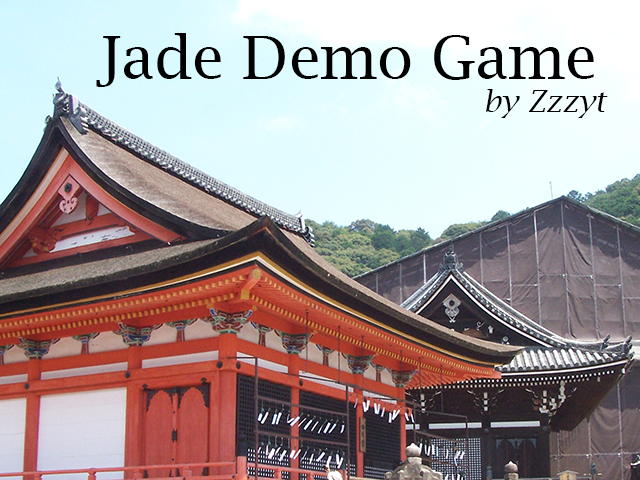
<style>
.page{position:relative;width:640px;height:480px}
.page>*{position:absolute;margin:0}
.t1{font:60px "LucidaBright";color:#010101}
.t2{font:30px "LucidaBright-Italic";color:#000000}
</style>
<div class="page">
<p class="t1" style="left:96px;top:33px;width:498px;height:54px">Jade Demo Game</p>
<p class="t2" style="left:486px;top:89px;width:122px;height:29px">by Zzzyt</p>
</div>
